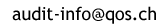
<style>
.page{position:relative;width:168px;height:26px;background:#ffffff}
.page>*{position:absolute;margin:0}
.t1{font:17.9px "TrebuchetMS";color:#000000}
</style>
<div class="page">
<p class="t1" style="left:12px;top:6px;width:144px;height:18px">audit-info@qos.ch</p>
</div>
